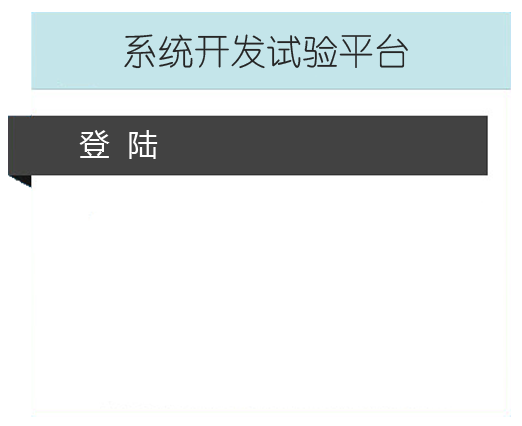
<style>
.page{position:relative;width:522px;height:426px;background:#ffffff}
.page>*{position:absolute;margin:0}
.t1{font:36px "YouYuan";color:#252525}
.t2{font:30px "MicrosoftYaHei";color:#ffffff}
</style>
<div class="page">
<p class="t1" style="left:124px;top:34px;width:284px;height:35px">系统开发试验平台</p>
<p class="t2" style="left:79px;top:130px;width:79px;height:29px">登  陆</p>
</div>
